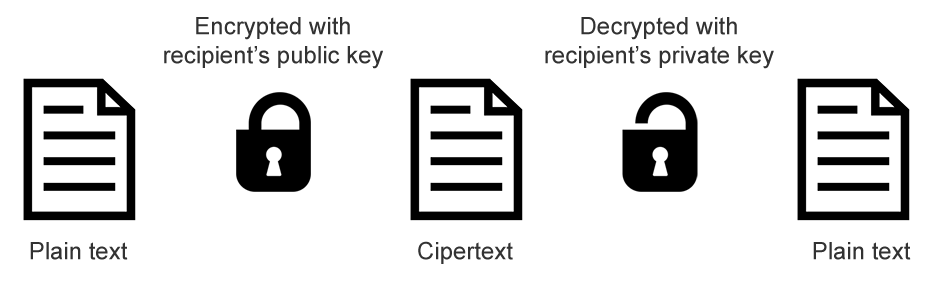
<style>
.page{position:relative;width:940px;height:300px;background:#ffffff}
.page>*{position:absolute;margin:0}
.t1{font:24px "ArialMT";color:#323232}
</style>
<div class="page">
<p class="t1" style="left:164px;top:17px;width:219px;height:52px;text-align:center">Encrypted with<br>recipient’s public key</p>
<p class="t1" style="left:545px;top:17px;width:229px;height:52px;text-align:center">Decrypted with<br>recipient’s private key</p>
<p class="t1" style="left:30px;top:242px;width:98px;height:18px">Plain text</p>
<p class="t1" style="left:418px;top:241px;width:95px;height:23px">Cipertext</p>
<p class="t1" style="left:813px;top:242px;width:98px;height:18px">Plain text</p>
</div>
